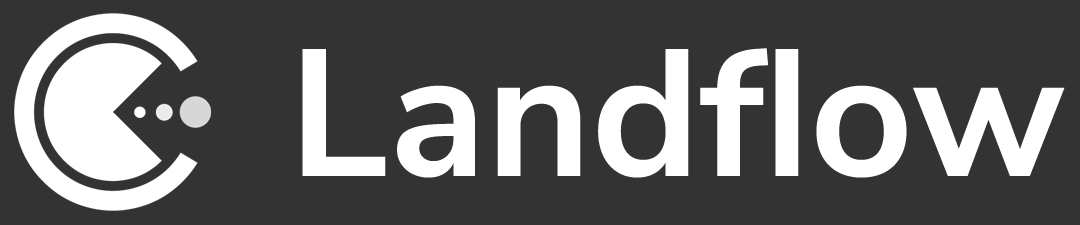
<style>
.page{position:relative;width:1080px;height:225px;background:#333333}
.page>*{position:absolute;margin:0}
.t1{font:180px "NunitoSans-Bold";color:#ffffff}
</style>
<div class="page">
<p class="t1" style="left:302px;top:48px;width:763px;height:130px">Landflow</p>
</div>
